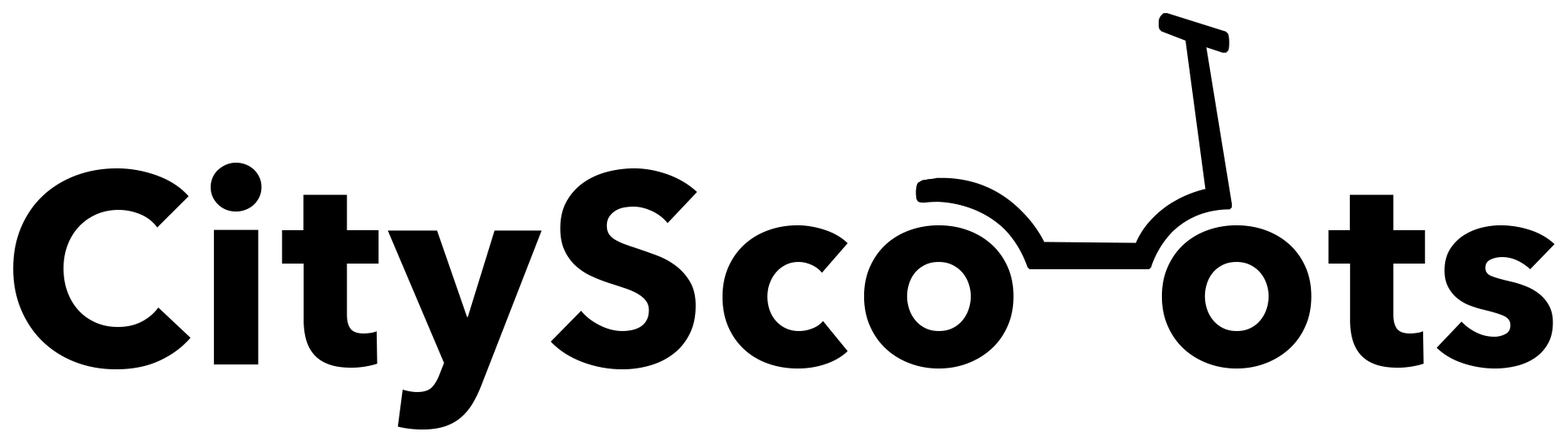
<style>
.page{position:relative;width:1568px;height:436px;background:#ffffff}
.page>*{position:absolute;margin:0}
.t1{font:270.5px "AvenirNext-Bold";letter-spacing:0.02em;color:#000000}
</style>
<div class="page">
<p class="t1" style="left:13px;top:163px;width:1542px;height:267px">CitySco  ots</p>
</div>
